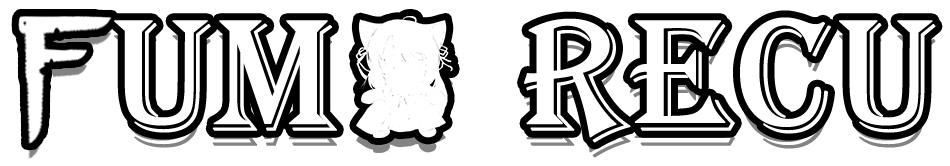
<style>
.page{position:relative;width:950px;height:166px;background:#ffffff}
.page>*{position:absolute;margin:0}
.t1{font:164px "Algerian";color:#ffffff;font-weight:bold}
</style>
<div class="page">
<p class="t1" style="left:114px;top:17px;width:822px;height:126px">um    RECU</p>
</div>
